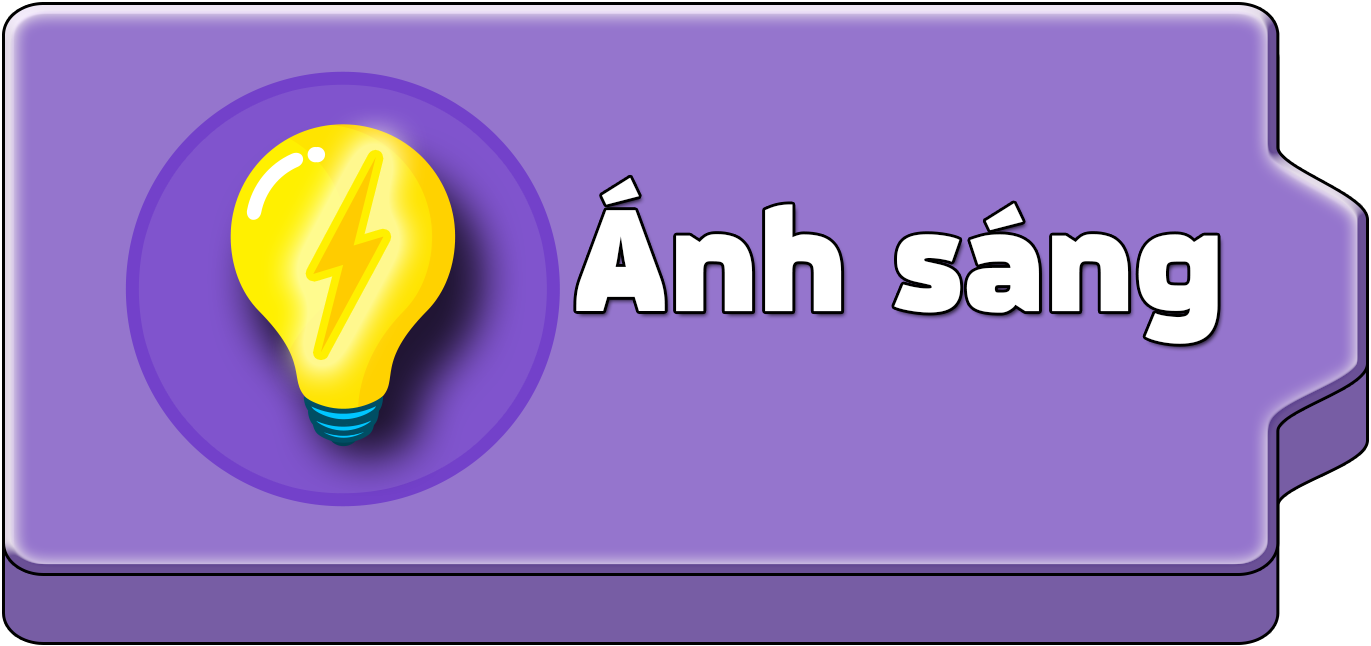
<style>
.page{position:relative;width:1371px;height:646px;background:#9575cd}
.page>*{position:absolute;margin:0}
.t1{font:142px "MovaviGrotesqueBlack";color:#ffffff}
</style>
<div class="page">
<p class="t1" style="left:576px;top:177px;width:642px;height:167px">Ánh sáng</p>
</div>
